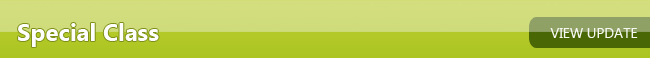
<style>
.page{position:relative;width:650px;height:58px}
.page>*{position:absolute;margin:0}
.t1{font:24px "SegoeUI-Bold";color:#fefefe}
.t2{font:14px "SegoeUI";color:#f6f7f1}
</style>
<div class="page">
<p class="t1" style="left:18px;top:23px;width:141px;height:24px">Special Class</p>
<p class="t2" style="left:550px;top:28px;width:88px;height:10px">VIEW UPDATE</p>
</div>
